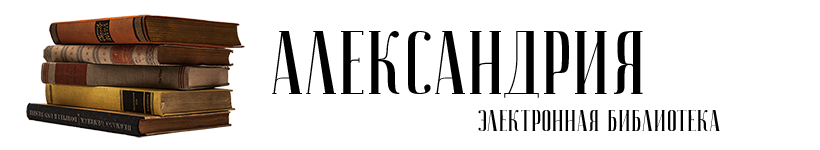
<style>
.page{position:relative;width:820px;height:150px;background:#ffffff}
.page>*{position:absolute;margin:0}
.t1{font:90px "JOURNALISM";color:#000000}
.t2{font:30px "JOURNALISM";color:#000000}
</style>
<div class="page">
<p class="t1" style="left:272px;top:31px;width:371px;height:67px">Александрия</p>
<p class="t2" style="left:478px;top:110px;width:242px;height:21px">электронная библиотека</p>
</div>
